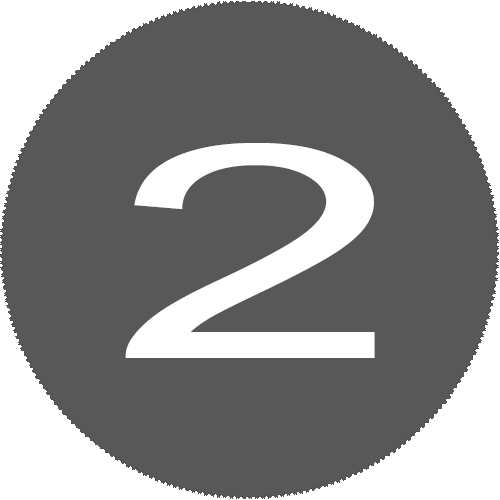
<style>
.page{position:relative;width:500px;height:500px;background:#585858}
.page>*{position:absolute;margin:0}
.t1{font:300px "ArialMT";color:#ffffff;scale:1.75 1}
</style>
<div class="page">
<p class="t1" style="left:125px;top:143px;width:250px;height:215px">2</p>
</div>
